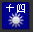
<style>
.page{position:relative;width:33px;height:32px;background:#000090}
.page>*{position:absolute;margin:0}
.t1{font:10.4px "SimSun";color:#ffffff}
</style>
<div class="page">
<p class="t1" style="left:6px;top:4px;width:19px;height:9px">十四</p>
</div>
